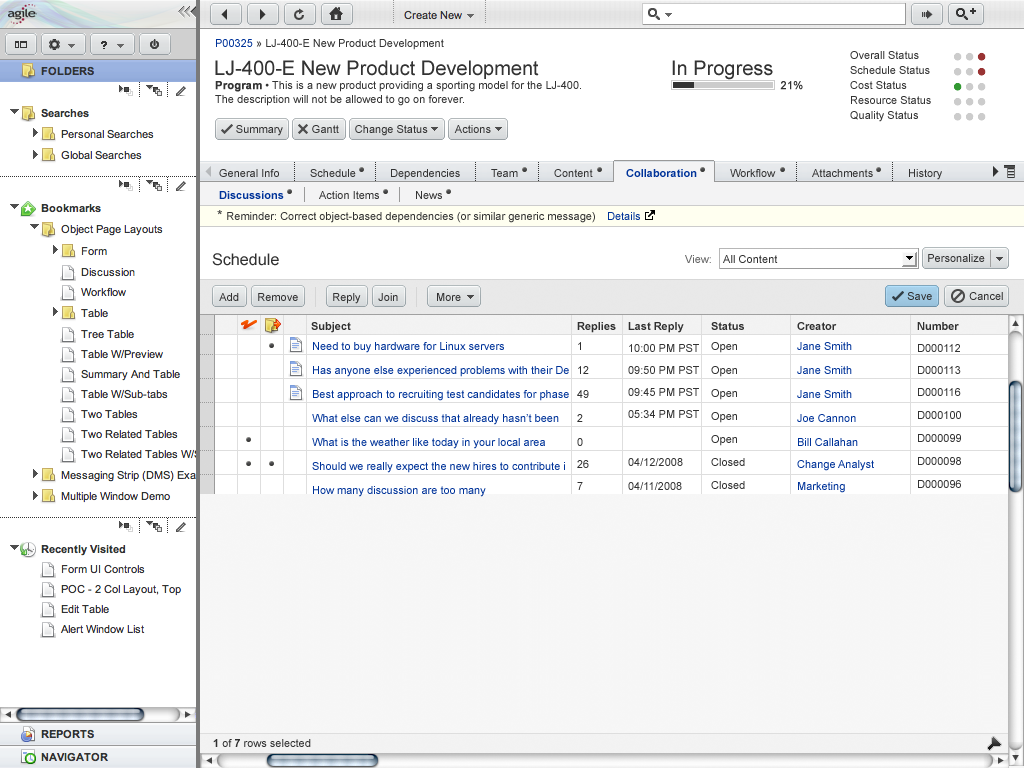
<style>
.page{position:relative;width:1024px;height:768px;background:#ffffff}
.page>*{position:absolute;margin:0}
.t1{font:11px "ArialMT";color:#333333}
.t2{font:11px "ArialMT";color:#003399}
.t3{font:20px "ArialMT";color:#333333}
.t4{font:11px/14px "ArialMT";color:#333333}
.t5{font:11px/14px "Arial-BoldMT";color:#333333;font-weight:bold}
.t6{font:11px "ArialMT";color:#333333;font-weight:bold}
.t7{font:11px "Arial-BoldMT";color:#003399}
.t8{font:14px "ArialMT";color:#333333}
.t9{font:16px "ArialMT";letter-spacing:0.005em;color:#303030}
.t10{font:11px "ArialMT";letter-spacing:0.005em;color:#666666}
.t11{font:11px "ArialMT";letter-spacing:0.005em;color:#303030}
.t12{font:11px "ArialMT";color:#303030}
.t13{font:11px "Arial-BoldMT";color:#303030}
.t14{font:11px/24px "ArialMT";color:#303030}
.t15{font:11px/20px "Arial-BoldMT";color:#303030}
.t16{font:11px/20px "ArialMT";color:#303030}
.t17{font:11px/22px "ArialMT";color:#303030}
.t18{font:11px/22px "ArialMT";color:#333333}
.t19{font:11px/24px "ArialMT";color:#333333}
.t20{font:11px/23px "ArialMT";color:#303030}
.t21{font:11px/24px "ArialMT";color:#003399}
.t22{font:11px/20px "ArialMT";color:#003399}
.t23{font:11px/22px "ArialMT";color:#003399}
.t24{font:11px/23px "ArialMT";color:#333333}
</style>
<div class="page">
<p class="t1" style="left:216px;top:39px;width:228px;height:11px"><span class="t2">P00325</span> » LJ-400-E New Product Development</p>
<p class="t3" style="left:215px;top:60px;width:324px;height:19px">LJ-400-E New Product Development</p>
<p class="t3" style="left:672px;top:60px;width:101px;height:20px">In Progress</p>
<p class="t4" style="left:215px;top:81px;width:366px;height:25px"><span class="t5">Program</span> • This is a new product providing a sporting model for the LJ-400.  <br>The description will not be allowed to go on forever.</p>
<p class="t6" style="left:780px;top:81px;width:23px;height:9px">21%</p>
<p class="t1" style="left:236px;top:125px;width:47px;height:11px">Summary</p>
<p class="t1" style="left:312px;top:125px;width:27px;height:8px">Gantt</p>
<p class="t1" style="left:355px;top:125px;width:73px;height:11px">Change Status</p>
<p class="t1" style="left:454px;top:125px;width:37px;height:8px">Actions</p>
<p class="t1" style="left:219px;top:169px;width:60px;height:8px">General Info</p>
<p class="t1" style="left:310px;top:169px;width:46px;height:8px">Schedule</p>
<p class="t1" style="left:391px;top:169px;width:69px;height:11px">Dependencies</p>
<p class="t1" style="left:491px;top:169px;width:27px;height:8px">Team</p>
<p class="t1" style="left:554px;top:169px;width:39px;height:8px">Content</p>
<p class="t7" style="left:626px;top:169px;width:71px;height:8px">Collaboration</p>
<p class="t1" style="left:730px;top:169px;width:46px;height:8px">Workflow</p>
<p class="t1" style="left:812px;top:169px;width:61px;height:8px">Attachments</p>
<p class="t1" style="left:909px;top:169px;width:33px;height:11px">History</p>
<p class="t7" style="left:219px;top:191px;width:65px;height:8px">Discussions</p>
<p class="t1" style="left:319px;top:191px;width:60px;height:8px">Action Items</p>
<p class="t1" style="left:416px;top:191px;width:26px;height:8px">News</p>
<p class="t1" style="left:217px;top:210px;width:378px;height:13px"><span class="t8">* </span>Reminder: Correct object-based dependencies (or similar generic message)</p>
<p class="t2" style="left:608px;top:212px;width:32px;height:8px">Details</p>
<p class="t9" style="left:212px;top:253px;width:67px;height:13px">Schedule</p>
<p class="t10" style="left:685px;top:255px;width:26px;height:8px">View:</p>
<p class="t11" style="left:723px;top:255px;width:55px;height:8px">All Content</p>
<p class="t12" style="left:928px;top:254px;width:57px;height:8px">Personalize</p>
<p class="t12" style="left:219px;top:293px;width:20px;height:8px">Add</p>
<p class="t12" style="left:258px;top:293px;width:40px;height:8px">Remove</p>
<p class="t12" style="left:333px;top:293px;width:28px;height:11px">Reply</p>
<p class="t12" style="left:378px;top:293px;width:20px;height:8px">Join</p>
<p class="t12" style="left:437px;top:293px;width:24px;height:8px">More</p>
<p class="t12" style="left:907px;top:292px;width:25px;height:8px">Save</p>
<p class="t12" style="left:969px;top:292px;width:34px;height:8px">Cancel</p>
<p class="t13" style="left:311px;top:322px;width:40px;height:11px">Subject</p>
<p class="t14" style="left:577px;top:322px;width:39px;height:168px"><span class="t15">Replies<br></span><span class="t16">1<br></span>12 <br>49<br>2<br>0<br><span class="t17">26<br>7</span></p>
<p class="t18" style="left:628px;top:322px;width:71px;height:168px"><span class="t15">Last Reply<br></span>10:00 PM PST<br>09:50 PM PST<br>09:45 PM PST<br>05:34 PM PST<br><span class="t19"><br>04/12/2008<br>04/11/2008</span></p>
<p class="t20" style="left:711px;top:322px;width:34px;height:167px"><span class="t15">Status<br></span><span class="t16">Open<br>Open <br></span>Open<br>Open<br>Open<br>Closed<br>Closed</p>
<p class="t21" style="left:797px;top:322px;width:77px;height:171px"><span class="t15">Creator<br></span><span class="t22">Jane Smith<br></span>Jane Smith <br>Jane Smith<br>Joe Cannon<br>Bill Callahan<br><span class="t23">Change Analyst<br>Marketing</span></p>
<p class="t24" style="left:917px;top:322px;width:44px;height:166px"><span class="t15">Number<br></span><span class="t18">D000112<br>D000113<br>D000116<br></span>D000100<br>D000099<br>D000098<br>D000096</p>
<p class="t21" style="left:312px;top:342px;width:257px;height:155px"><span class="t22">Need to buy hardware for Linux servers<br></span>Has anyone else experienced problems with their De<br>Best approach to recruiting test candidates for phase<br>What else can we discuss that already hasn’t been<br>What is the weather like today in your local area<br>Should we really expect the new hires to contribute i<br>How many discussion are too many</p>
<p class="t12" style="left:213px;top:739px;width:98px;height:8px"><span class="t13">1</span> of <span class="t13">7</span> rows selected</p>
</div>
